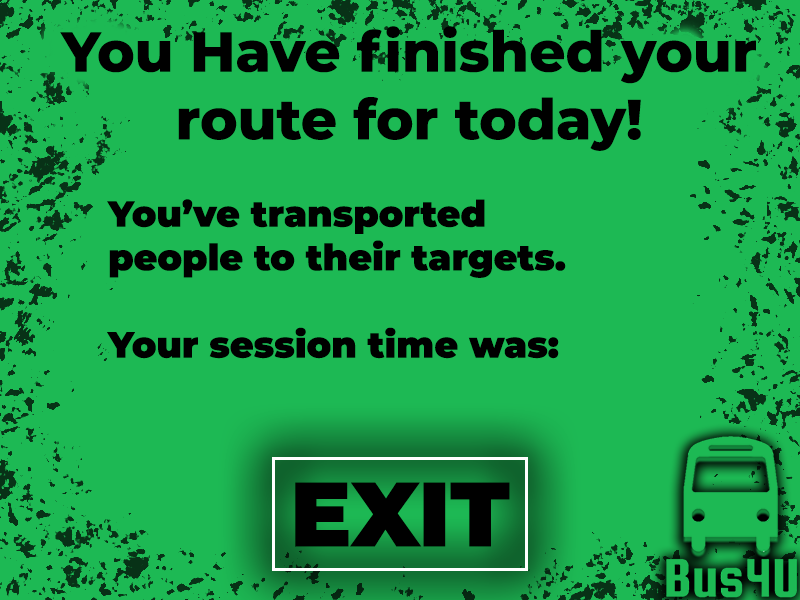
<style>
.page{position:relative;width:800px;height:600px;background:#1db954}
.page>*{position:absolute;margin:0}
.t1{font:56.4px "Montserrat-ExtraBold";color:#000000}
.t2{font:36.4px "Montserrat-Black";color:#000000}
.t3{font:91px "Montserrat-Black";color:#000000}
</style>
<div class="page">
<p class="t1" style="left:60px;top:26px;width:696px;height:125px;text-align:center">You Have finished your route for today!</p>
<p class="t2" style="left:107px;top:199px;width:459px;height:160px">You’ve transported       people to their targets.<br><br>Your session time was:</p>
<p class="t3" style="left:295px;top:482px;width:215px;height:65px">EXIT</p>
</div>
